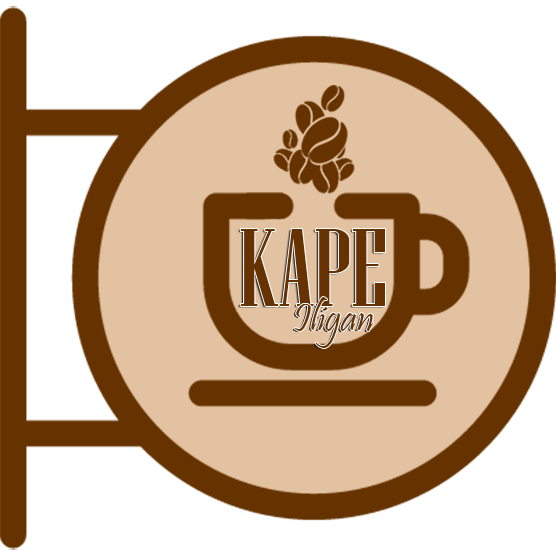
<style>
.page{position:relative;width:556px;height:556px;background:#e2c2a1}
.page>*{position:absolute;margin:0}
.t1{font:110.6px "NiagaraSolid-Reg";color:#663300;text-transform:uppercase;scale:1.15 1}
.t2{font:41.1px "Pristina-Regular";color:#663300}
</style>
<div class="page">
<p class="t1" style="left:240px;top:229px;width:145px;height:77px">Kape</p>
<p class="t2" style="left:295px;top:297px;width:79px;height:51px">Iligan</p>
</div>
